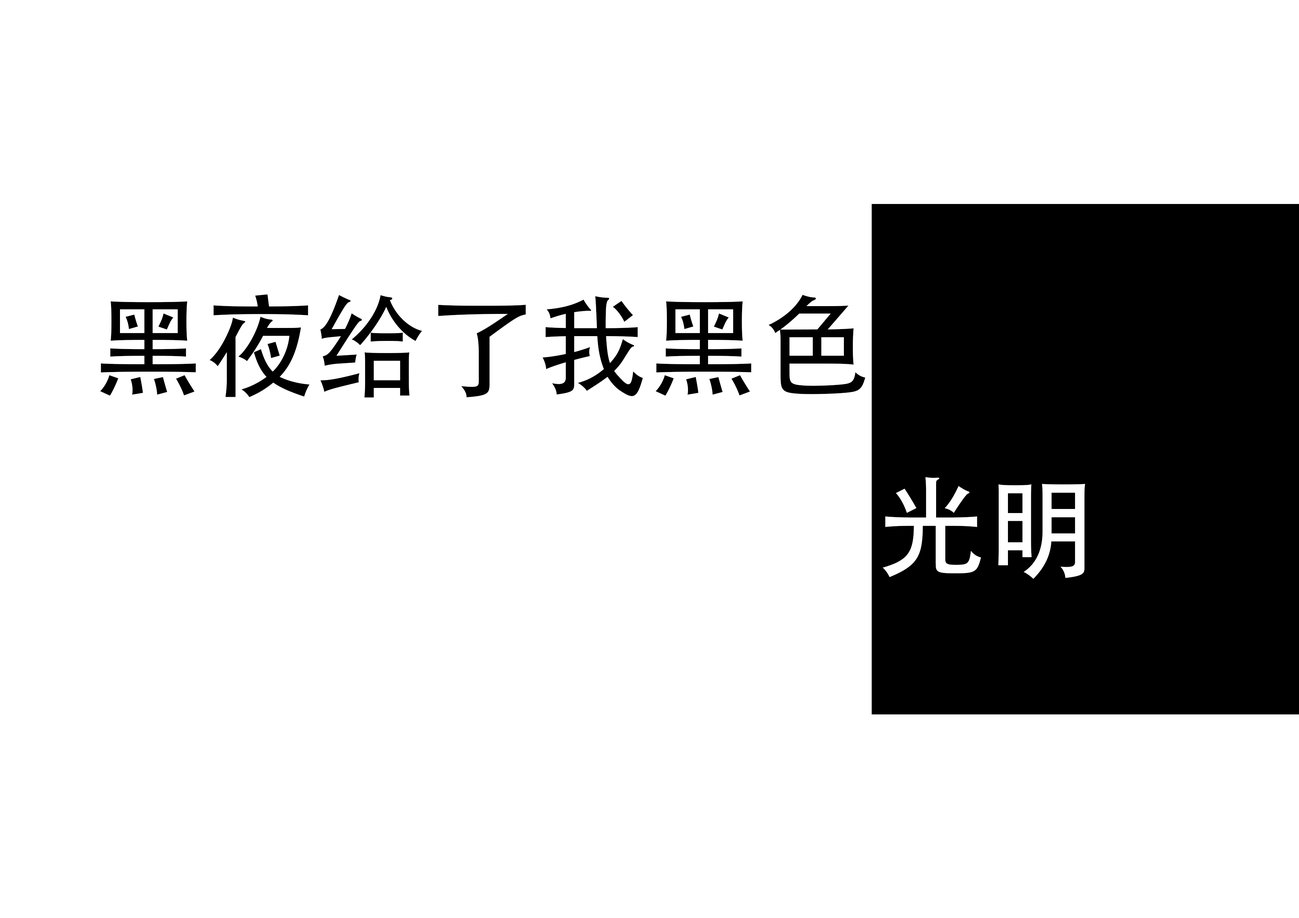
<style>
.page{position:relative;width:1299px;height:918px;background:#ffffff}
.page>*{position:absolute;margin:0}
.t1{font:111.1px "AdobeHeitiStd-Regular";color:#000000}
</style>
<div class="page">
<p class="t1" style="left:100px;top:294px;width:1098px;height:105px">黑夜给了我黑色的眼睛</p>
</div>
